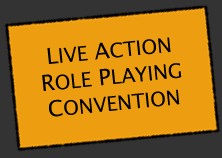
<style>
.page{position:relative;width:222px;height:158px;background:#ed9d10}
.page>*{position:absolute;margin:0}
.t1{font:20px "LucidaSansUnicode";color:#000000}
.t2{font:22px "LucidaSansUnicode";color:#000000}
</style>
<div class="page">
<p class="t1" style="left:42px;top:37px;width:140px;height:80px;text-align:center;rotate:-6deg"><span class="t2">L</span>IVE<span class="t2"> A</span>CTION<span class="t2"> <br>R</span>OLE<span class="t2"> P</span>LAYING<br><span class="t2">C</span>ONVENTION</p>
</div>
